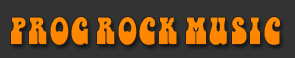
<style>
.page{position:relative;width:295px;height:58px;background:#333333}
.page>*{position:absolute;margin:0}
.t1{font:39.6px "Psychedelia-HM";letter-spacing:0.075em;color:#ff8700;scale:0.91 1}
.t2{font:39.6px "Psychedelia-HM";letter-spacing:0.2em;color:#ff8700;scale:0.91 1}
</style>
<div class="page">
<p class="t1" style="left:11px;top:17px;width:269px;height:28px">PRO<span class="t2">G</span>ROC<span class="t2">K</span>MUSIC</p>
</div>
